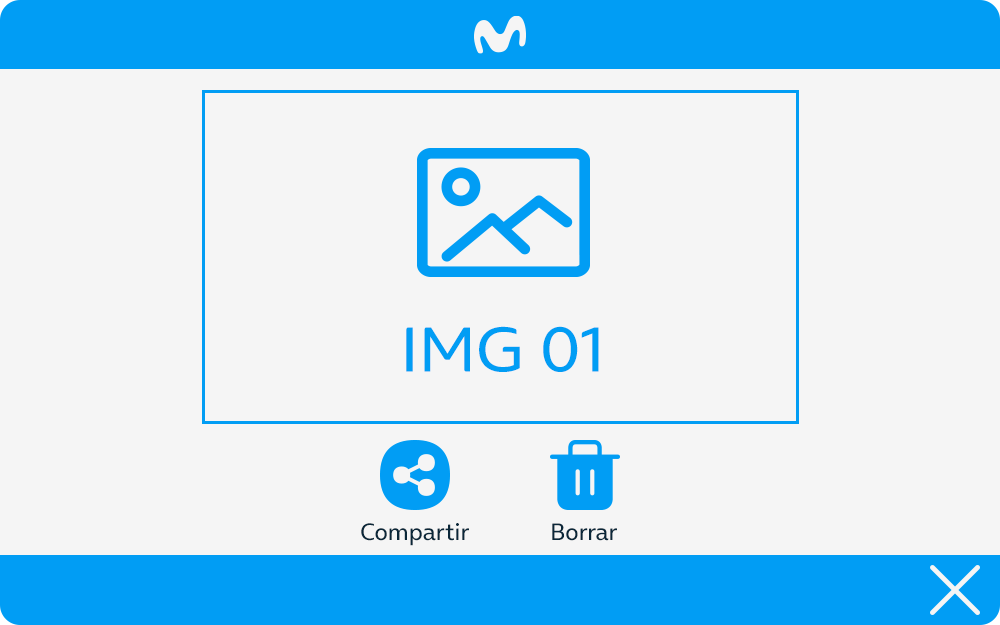
<style>
.page{position:relative;width:1000px;height:625px;background:#f5f5f5}
.page>*{position:absolute;margin:0}
.t1{font:64.1px "OnAir-Regular";color:#019df4}
.t2{font:24px "OnAir-Regular";color:#0a2739}
</style>
<div class="page">
<p class="t1" style="left:406px;top:326px;width:193px;height:46px">IMG 01</p>
<p class="t2" style="left:361px;top:523px;width:108px;height:23px">Compartir</p>
<p class="t2" style="left:552px;top:523px;width:65px;height:18px">Borrar</p>
</div>
